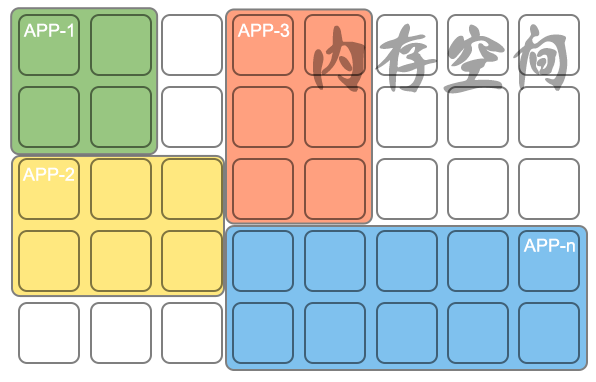
<style>
.page{position:relative;width:596px;height:382px;background:#ffffff}
.page>*{position:absolute;margin:0}
.t1{font:18px "ArialMT";color:#ffffff}
.t2{font:67.4px "GSZL--HSJHDT-0";color:#a3a3a3}
</style>
<div class="page">
<p class="t1" style="left:23px;top:23px;width:50px;height:14px">APP-1</p>
<p class="t1" style="left:237px;top:23px;width:53px;height:14px">APP-3</p>
<p class="t2" style="left:313px;top:23px;width:255px;height:71px">内存空间</p>
<p class="t1" style="left:22px;top:167px;width:52px;height:14px">APP-2</p>
<p class="t1" style="left:523px;top:238px;width:52px;height:14px">APP-n</p>
</div>
